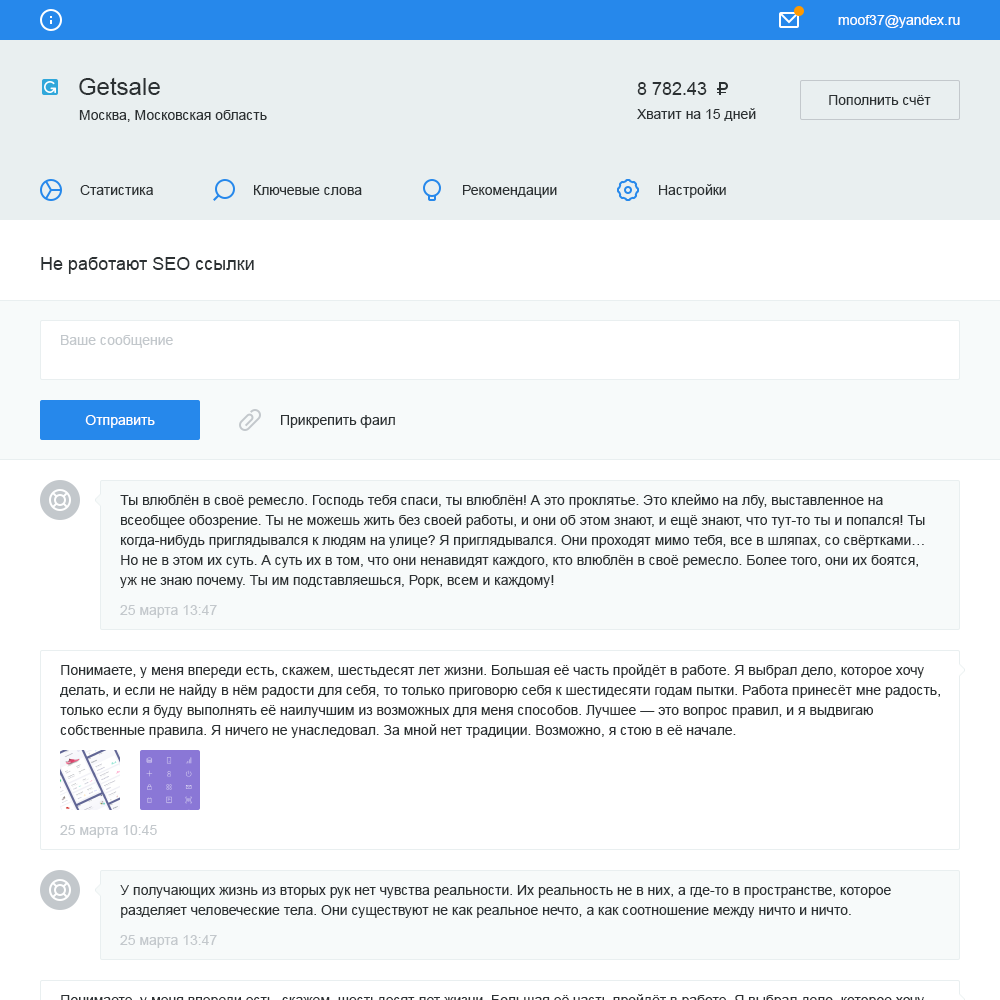
<style>
.page{position:relative;width:1000px;height:1000px;background:#ffffff}
.page>*{position:absolute;margin:0}
.t1{font:14px "ArialMT";color:#ffffff}
.t2{font:24px "ArialMT";color:#2c3133}
.t3{font:18px "ArialMT";color:#2c3133}
.t4{font:14px "ArialMT";color:#2c3133}
.t5{font:14px "ArialMT";color:#c3c8cc}
.t6{font:14px/20px "ArialMT";color:#2c3133}
</style>
<div class="page">
<p class="t1" style="left:838px;top:15px;width:122px;height:13px">moof37@yandex.ru</p>
<p class="t2" style="left:79px;top:77px;width:81px;height:18px">Getsale</p>
<p class="t3" style="left:637px;top:82px;width:70px;height:13px">8 782.43</p>
<p class="t4" style="left:829px;top:95px;width:102px;height:10px">Пополнить счёт</p>
<p class="t4" style="left:79px;top:110px;width:188px;height:12px">Москва, Московская область</p>
<p class="t4" style="left:637px;top:108px;width:119px;height:13px">Хватит на 15 дней</p>
<p class="t4" style="left:80px;top:185px;width:73px;height:10px">Статистика</p>
<p class="t4" style="left:254px;top:185px;width:108px;height:10px">Ключевые слова</p>
<p class="t4" style="left:463px;top:185px;width:94px;height:13px">Рекомендации</p>
<p class="t4" style="left:659px;top:184px;width:67px;height:14px">Настройки</p>
<p class="t3" style="left:41px;top:257px;width:213px;height:17px">Не работают SEO ссылки</p>
<p class="t5" style="left:61px;top:335px;width:112px;height:13px">Ваше сообщение</p>
<p class="t1" style="left:85px;top:415px;width:70px;height:13px">Отправить</p>
<p class="t4" style="left:281px;top:415px;width:114px;height:13px">Прикрепить фаил</p>
<p class="t6" style="left:120px;top:494px;width:805px;height:94px">Ты влюблён в своё ремесло. Господь тебя спаси, ты влюблён! А это проклятье. Это клеймо на лбу, выставленное на <br>всеобщее обозрение. Ты не можешь жить без своей работы, и они об этом знают, и ещё знают, что тут-то ты и попался! Ты <br>когда-нибудь приглядывался к людям на улице? Я приглядывался. Они проходят мимо тебя, все в шляпах, со свёртками… <br>Но не в этом их суть. А суть их в том, что они ненавидят каждого, кто влюблён в своё ремесло. Более того, они их боятся, <br>уж не знаю почему. Ты им подставляешься, Рорк, всем и каждому!</p>
<p class="t5" style="left:120px;top:605px;width:97px;height:13px">25 марта 13:47</p>
<p class="t6" style="left:60px;top:664px;width:880px;height:74px">Понимаете, у меня впереди есть, скажем, шестьдесят лет жизни. Бо́льшая её часть пройдёт в работе. Я выбрал дело, которое хочу <br>делать, и если не найду в нём радости для себя, то только приговорю себя к шестидесяти годам пытки. Работа принесёт мне радость, <br>только если я буду выполнять её наилучшим из возможных для меня способов. Лучшее — это вопрос правил, и я выдвигаю <br>собственные правила. Я ничего не унаследовал. За мной нет традиции. Возможно, я стою в её начале.</p>
<p class="t5" style="left:60px;top:825px;width:97px;height:13px">25 марта 10:45</p>
<p class="t6" style="left:120px;top:885px;width:771px;height:33px">У получающих жизнь из вторых рук нет чувства реальности. Их реальность не в них, а где-то в пространстве, которое <br>разделяет человеческие тела. Они существуют не как реальное нечто, а как соотношение между ничто и ничто.</p>
<p class="t5" style="left:120px;top:935px;width:97px;height:13px">25 марта 13:47</p>
</div>
